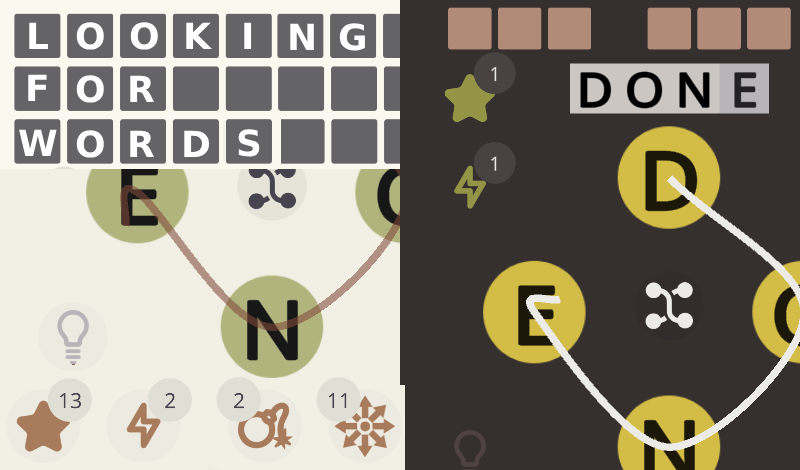
<style>
.page{position:relative;width:800px;height:470px;background:#352f2e}
.page>*{position:absolute;margin:0}
.t1{font:36px "DejaVuSans-Bold";color:#ffffff}
</style>
<div class="page">
<p class="t1" style="left:29px;top:22px;width:19px;height:27px">L</p>
<p class="t1" style="left:76px;top:22px;width:28px;height:28px">O</p>
<p class="t1" style="left:130px;top:22px;width:28px;height:28px">O</p>
<p class="t1" style="left:186px;top:22px;width:26px;height:27px">K</p>
<p class="t1" style="left:244px;top:22px;width:8px;height:27px">I</p>
<p class="t1" style="left:290px;top:23px;width:24px;height:27px">N</p>
<p class="t1" style="left:339px;top:23px;width:26px;height:28px">G</p>
<p class="t1" style="left:28px;top:74px;width:19px;height:27px">F</p>
<p class="t1" style="left:76px;top:75px;width:28px;height:28px">О</p>
<p class="t1" style="left:130px;top:75px;width:24px;height:27px">R</p>
<p class="t1" style="left:19px;top:129px;width:38px;height:27px">W</p>
<p class="t1" style="left:76px;top:130px;width:28px;height:28px">O</p>
<p class="t1" style="left:130px;top:130px;width:24px;height:27px">R</p>
<p class="t1" style="left:184px;top:130px;width:26px;height:27px">D</p>
<p class="t1" style="left:238px;top:129px;width:22px;height:28px">S</p>
</div>
